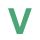
<style>
.page{position:relative;width:40px;height:40px;background:#ffffff}
.page>*{position:absolute;margin:0}
.t1{font:36px "Arial-BoldMT";letter-spacing:-0.05em;color:#4ba575}
</style>
<div class="page">
<p class="t1" style="left:8px;top:8px;width:24px;height:26px">V</p>
</div>
